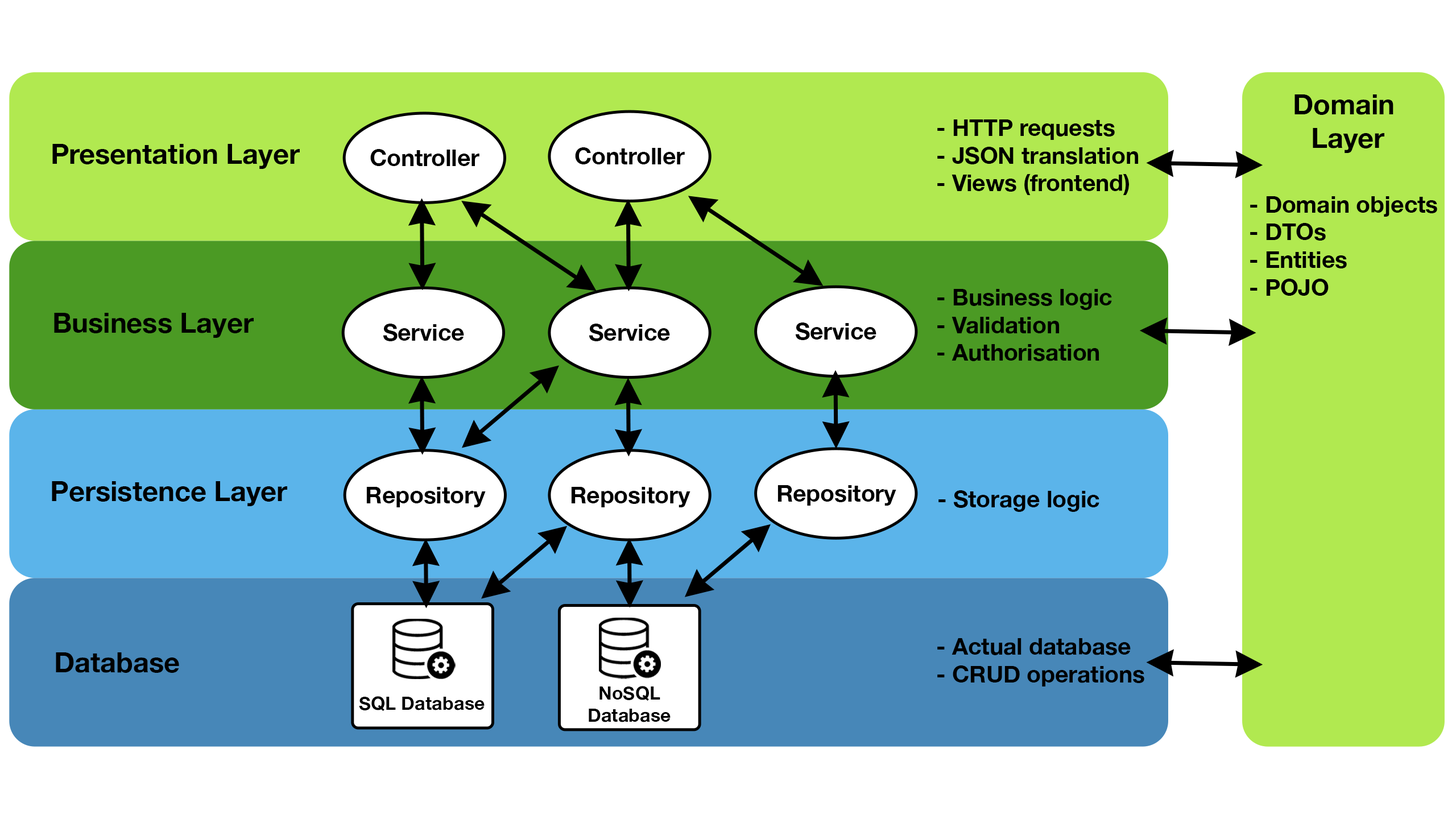
<style>
.page{position:relative;width:1456px;height:819px;background:#ffffff}
.page>*{position:absolute;margin:0}
.t1{font:27.7px "HelveticaNeue-Bold";color:#000000}
.t2{font:23.1px "HelveticaNeue-Bold";color:#000000}
.t3{font:18.5px "HelveticaNeue-Bold";color:#000000}
</style>
<div class="page">
<p class="t1" style="left:1294px;top:94px;width:99px;height:59px;text-align:center">Domain <br>Layer</p>
<p class="t2" style="left:937px;top:119px;width:202px;height:76px">- HTTP requests<br>- JSON translation<br>- Views (frontend)</p>
<p class="t1" style="left:52px;top:144px;width:248px;height:25px">Presentation Layer</p>
<p class="t2" style="left:370px;top:149px;width:109px;height:17px">Controller</p>
<p class="t2" style="left:575px;top:147px;width:110px;height:17px">Controller</p>
<p class="t2" style="left:1250px;top:196px;width:187px;height:100px">- Domain objects<br>- DTOs<br>- Entities<br>- POJO</p>
<p class="t2" style="left:937px;top:289px;width:175px;height:72px">- Business logic<br>- Validation<br>- Authorisation</p>
<p class="t1" style="left:54px;top:313px;width:200px;height:25px">Business Layer</p>
<p class="t2" style="left:383px;top:324px;width:81px;height:17px">Service</p>
<p class="t2" style="left:589px;top:324px;width:81px;height:17px">Service</p>
<p class="t2" style="left:796px;top:322px;width:80px;height:18px">Service</p>
<p class="t1" style="left:52px;top:481px;width:235px;height:25px">Persistence Layer</p>
<p class="t2" style="left:777px;top:485px;width:119px;height:21px">Repository</p>
<p class="t2" style="left:366px;top:487px;width:120px;height:20px">Repository</p>
<p class="t2" style="left:571px;top:487px;width:119px;height:20px">Repository</p>
<p class="t2" style="left:938px;top:490px;width:161px;height:22px">- Storage logic</p>
<p class="t2" style="left:937px;top:638px;width:207px;height:48px">- Actual database<br>- CRUD operations</p>
<p class="t1" style="left:56px;top:652px;width:123px;height:21px">Database</p>
<p class="t3" style="left:589px;top:686px;width:82px;height:36px;text-align:center">NoSQL<br>Database</p>
<p class="t3" style="left:359px;top:696px;width:126px;height:15px">SQL Database</p>
</div>
